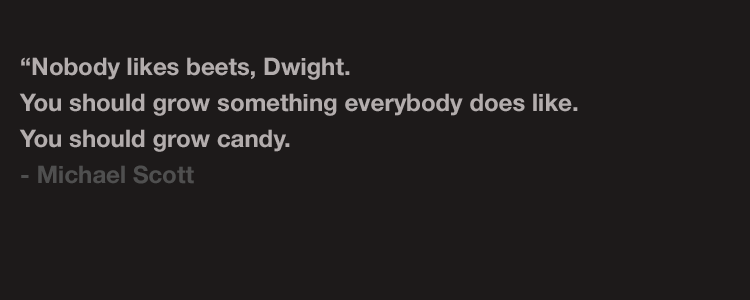
<style>
.page{position:relative;width:750px;height:300px;background:#1d1a1a}
.page>*{position:absolute;margin:0}
.t1{font:24px/36px "HelveticaNeue-Bold";color:#b3adad}
.t2{font:24px/36px "HelveticaNeue-Bold";color:#4f4f4f}
</style>
<div class="page">
<p class="t1" style="left:19px;top:57px;width:559px;height:127px">“Nobody likes beets, Dwight.<br>You should grow something everybody does like. <br>You should grow candy.<br><span class="t2">- Michael Scott</span></p>
</div>
